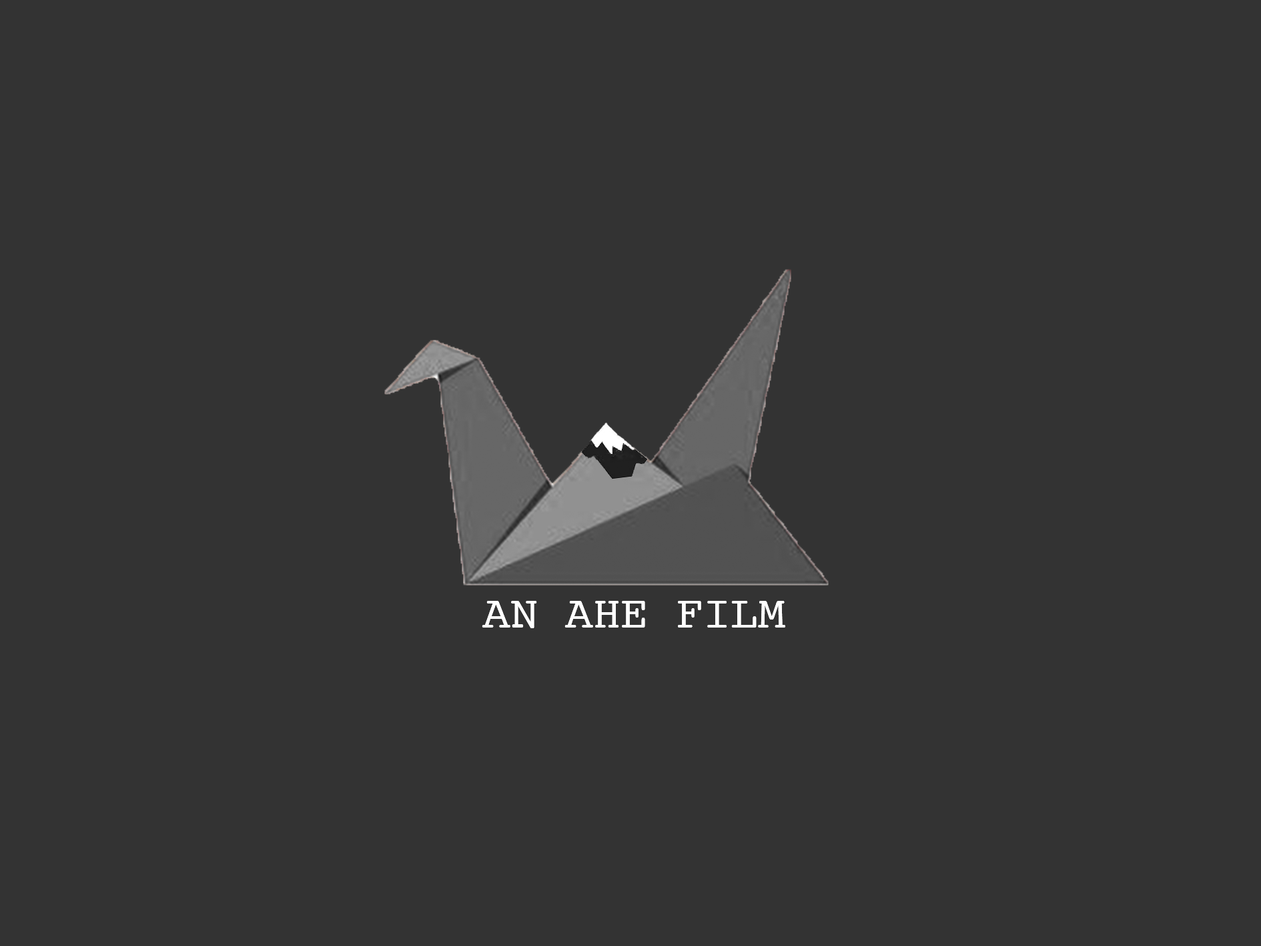
<style>
.page{position:relative;width:1261px;height:946px;background:#333333}
.page>*{position:absolute;margin:0}
.t1{font:45.9px "Courier";color:#ffffff}
</style>
<div class="page">
<p class="t1" style="left:482px;top:601px;width:303px;height:27px">AN AHE FILM</p>
</div>
